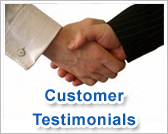
<style>
.page{position:relative;width:168px;height:134px}
.page>*{position:absolute;margin:0}
.t1{font:16px/24px "Arial-BoldMT";letter-spacing:0.04em;color:#0d59ad}
</style>
<div class="page">
<p class="t1" style="left:32px;top:89px;width:104px;height:37px;text-align:center">Customer<br>Testimonials</p>
</div>
